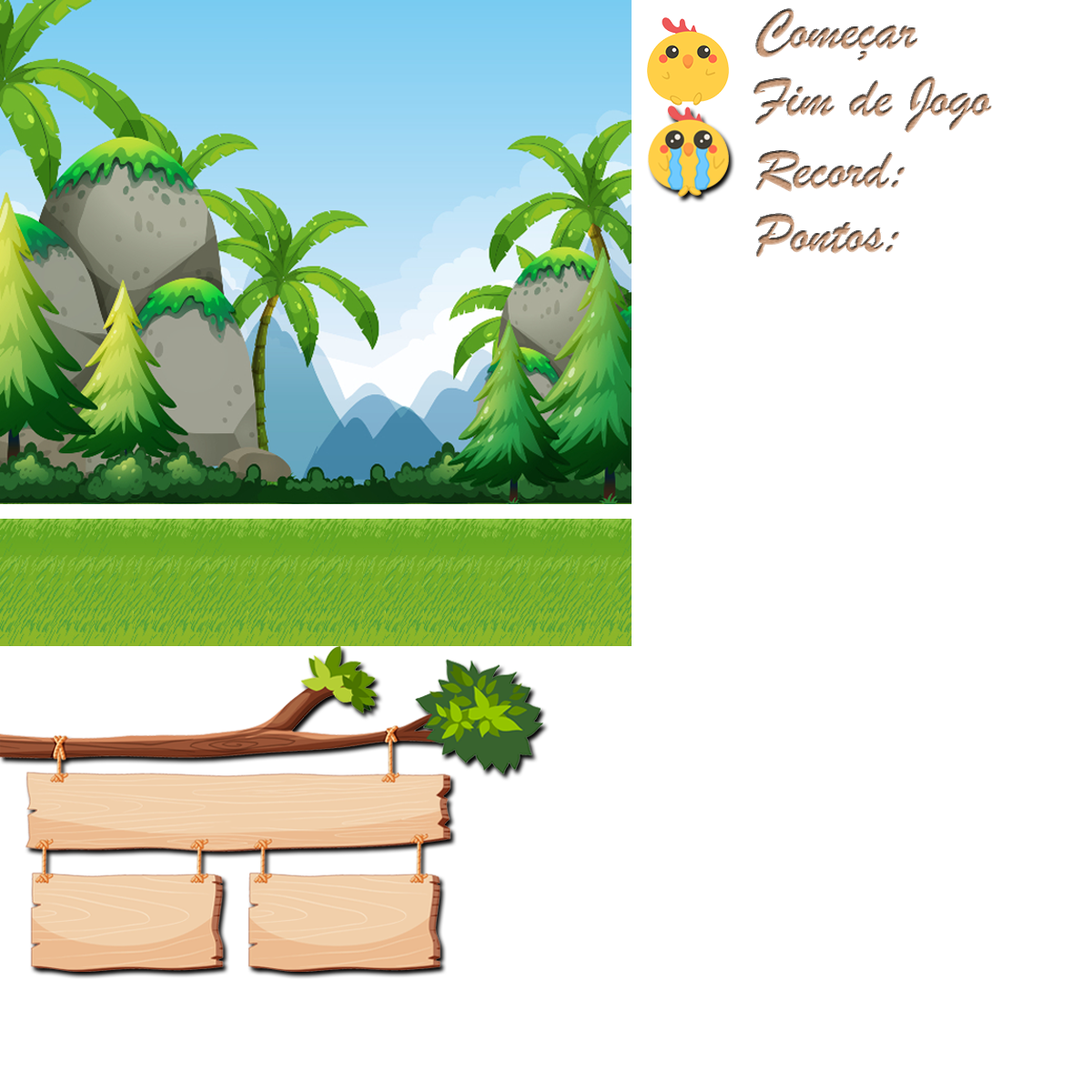
<style>
.page{position:relative;width:1092px;height:1092px;background:#ffffff}
.page>*{position:absolute;margin:0}
.t1{font:59.2px "BrushScriptMT"}
</style>
<div class="page">
<p class="t1" style="left:756px;top:9px;width:161px;height:52px">Começar</p>
<p class="t1" style="left:754px;top:77px;width:238px;height:56px">Fim de Jogo</p>
<p class="t1" style="left:756px;top:151px;width:149px;height:41px">:Record</p>
<p class="t1" style="left:756px;top:214px;width:143px;height:44px">:Pontos</p>
</div>
